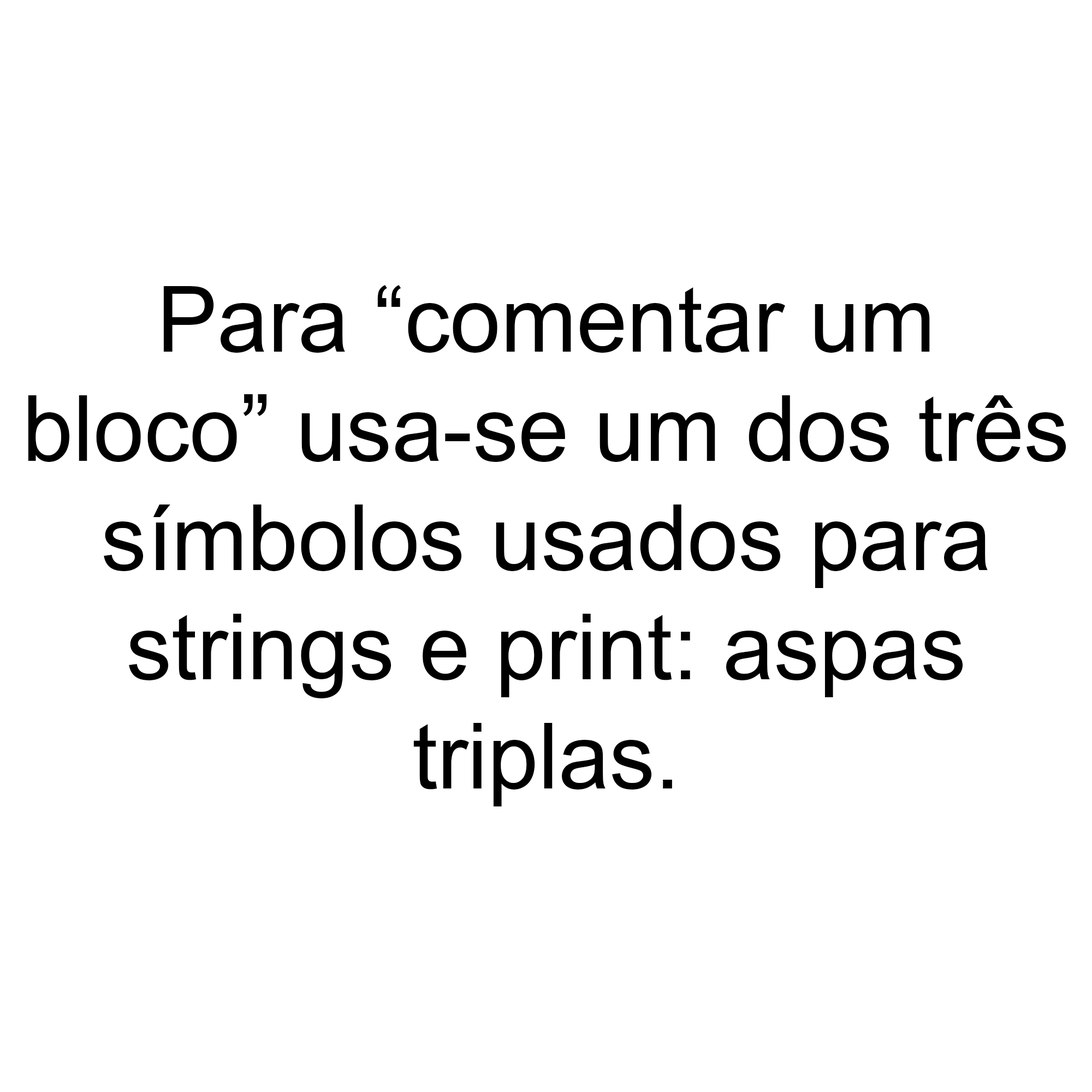
<style>
.page{position:relative;width:1092px;height:1092px;background:#ffffff}
.page>*{position:absolute;margin:0}
.t1{font:91px "ArialMT";color:#000000}
</style>
<div class="page">
<p class="t1" style="left:28px;top:285px;width:1038px;height:521px;text-align:center">Para “comentar um<br>bloco” usa-se um dos três<br>símbolos usados para<br>strings e print: aspas<br>triplas.</p>
</div>
